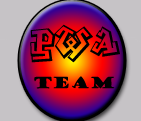
<style>
.page{position:relative;width:141px;height:121px;background:#c6c3c6}
.page>*{position:absolute;margin:0}
.t1{font:36px "GraffitiTreat";color:#000000}
.t2{font:15px "GoudyStout";color:#000000}
</style>
<div class="page">
<p class="t1" style="left:30px;top:24px;width:90px;height:39px">PWA</p>
<p class="t2" style="left:34px;top:76px;width:81px;height:13px">Team</p>
</div>
